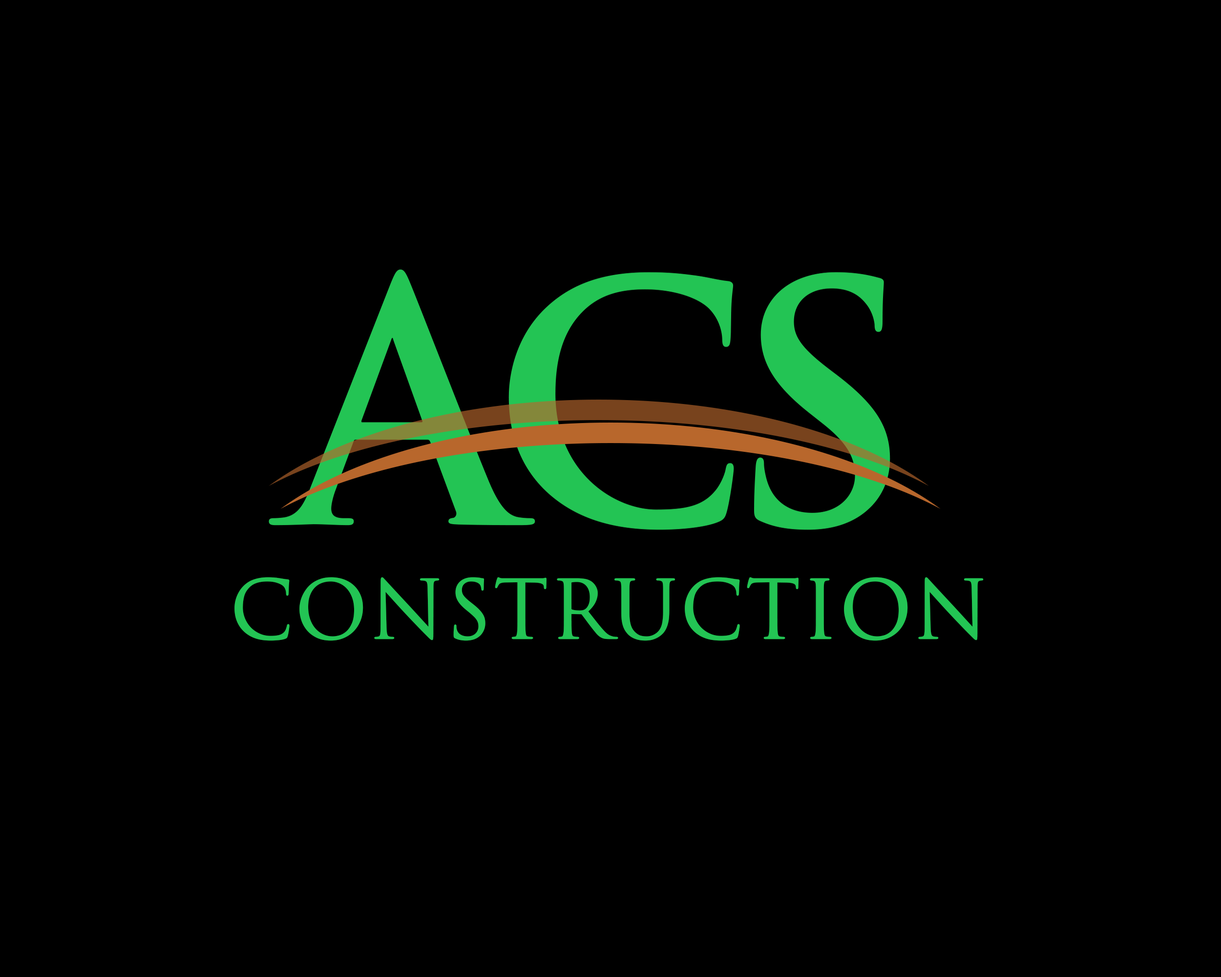
<style>
.page{position:relative;width:1221px;height:977px;background:#000000}
.page>*{position:absolute;margin:0}
.t1{font:79.1px "TrajanPro-Regular";color:#23c454;font-weight:bold}
</style>
<div class="page">
<p class="t1" style="left:234px;top:577px;width:750px;height:64px">CONSTRUCTION</p>
</div>
